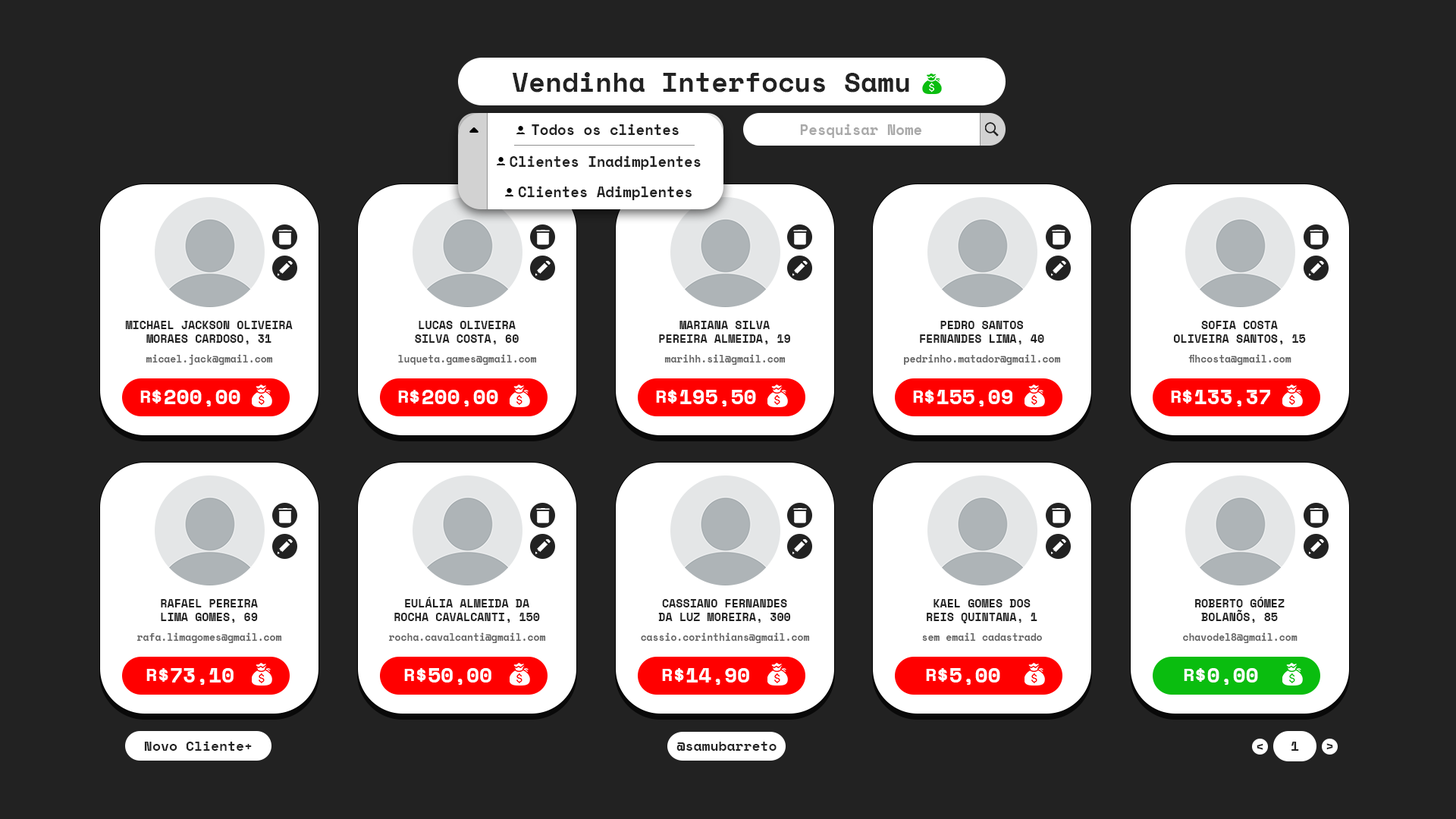
<style>
.page{position:relative;width:1456px;height:819px;background:#222222}
.page>*{position:absolute;margin:0}
.t1{font:27.1px "SpaceMono-Bold";color:#222222}
.t2{font:14.3px "SpaceMono-Bold";color:#222222}
.t3{font:14.3px "SpaceMono-Bold";color:#a9a9a9}
.t4{font:11.4px "SpaceMono-Bold";color:#222222}
.t5{font:9.9px "SpaceMono-Bold";color:#656565}
.t6{font:21.1px "SpaceMono-Bold";color:#ffffff}
.t7{font:18.5px "SpaceMono-Bold";color:#ffffff}
.t8{font:13.6px "SpaceMono-Bold";color:#222222}
</style>
<div class="page">
<p class="t1" style="left:512px;top:72px;width:397px;height:21px">Vendinha Interfocus Samu</p>
<p class="t2" style="left:532px;top:124px;width:147px;height:11px">Todos os clientes</p>
<p class="t2" style="left:532px;top:124px;width:147px;height:11px">Todos os clientes</p>
<p class="t3" style="left:800px;top:124px;width:121px;height:14px">Pesquisar Nome</p>
<p class="t2" style="left:510px;top:155px;width:191px;height:15px">Clientes Inadimplentes</p>
<p class="t2" style="left:518px;top:186px;width:174px;height:14px">Clientes Adimplentes</p>
<p class="t4" style="left:125px;top:321px;width:168px;height:23px;text-align:center">MICHAEL JACKSON OLIVEIRA<br>MORAES CARDOSO, 31</p>
<p class="t4" style="left:415px;top:321px;width:104px;height:23px;text-align:center">LUCAS OLIVEIRA<br>SILVA COSTA, 60</p>
<p class="t4" style="left:659px;top:321px;width:131px;height:23px;text-align:center">MARIANA SILVA<br>PEREIRA ALMEIDA, 19</p>
<p class="t4" style="left:920px;top:321px;width:124px;height:23px;text-align:center">PEDRO SANTOS<br>FERNANDES LIMA, 40</p>
<p class="t4" style="left:1173px;top:321px;width:133px;height:23px;text-align:center">SOFIA COSTA<br>OLIVEIRA SANTOS, 15</p>
<p class="t5" style="left:146px;top:354px;width:127px;height:11px">micael.jack@gmail.com</p>
<p class="t5" style="left:398px;top:354px;width:139px;height:11px">luqueta.games@gmail.com</p>
<p class="t5" style="left:664px;top:354px;width:122px;height:11px">marihh.sil@gmail.com</p>
<p class="t5" style="left:904px;top:354px;width:157px;height:11px">pedrinho.matador@gmail.com</p>
<p class="t5" style="left:1188px;top:354px;width:103px;height:11px">fihcosta@gmail.com</p>
<p class="t6" style="left:152px;top:390px;width:88px;height:16px">$200,00</p>
<p class="t6" style="left:409px;top:390px;width:89px;height:16px">$200,00</p>
<p class="t6" style="left:667px;top:390px;width:89px;height:16px">$195,50</p>
<p class="t6" style="left:924px;top:390px;width:88px;height:16px">$155,09</p>
<p class="t6" style="left:1182px;top:390px;width:88px;height:16px">$133,37</p>
<p class="t7" style="left:140px;top:391px;width:10px;height:12px">R</p>
<p class="t7" style="left:398px;top:391px;width:10px;height:12px">R</p>
<p class="t7" style="left:656px;top:391px;width:10px;height:12px">R</p>
<p class="t7" style="left:913px;top:391px;width:10px;height:12px">R</p>
<p class="t7" style="left:1171px;top:391px;width:10px;height:12px">R</p>
<p class="t4" style="left:161px;top:599px;width:97px;height:24px;text-align:center">RAFAEL PEREIRA<br>LIMA GOMES, 69</p>
<p class="t4" style="left:394px;top:597px;width:146px;height:26px;text-align:center">EULÁLIA ALMEIDA DA<br>ROCHA CAVALCANTI, 150</p>
<p class="t4" style="left:658px;top:599px;width:133px;height:24px;text-align:center">CASSIANO FERNANDES<br>DA LUZ MOREIRA, 300</p>
<p class="t4" style="left:927px;top:599px;width:110px;height:24px;text-align:center">KAEL GOMES DOS<br>REIS QUINTANA, 1</p>
<p class="t4" style="left:1195px;top:597px;width:90px;height:26px;text-align:center">ROBERTO GÓMEZ<br>BOLANÕS, 85</p>
<p class="t5" style="left:136px;top:632px;width:146px;height:11px">rafa.limagomes@gmail.com</p>
<p class="t5" style="left:388px;top:632px;width:158px;height:11px">rocha.cavalcanti@gmail.com</p>
<p class="t5" style="left:641px;top:632px;width:169px;height:11px">cassio.corinthians@gmail.com</p>
<p class="t5" style="left:922px;top:632px;width:120px;height:9px">sem email cadastrado</p>
<p class="t5" style="left:1183px;top:632px;width:114px;height:11px">chavodel8@gmail.com</p>
<p class="t7" style="left:146px;top:669px;width:10px;height:12px">R</p>
<p class="t6" style="left:158px;top:668px;width:76px;height:17px">$73,10</p>
<p class="t7" style="left:404px;top:669px;width:10px;height:12px">R</p>
<p class="t6" style="left:416px;top:668px;width:75px;height:17px">$50,00</p>
<p class="t7" style="left:662px;top:669px;width:10px;height:12px">R</p>
<p class="t6" style="left:674px;top:668px;width:75px;height:17px">$14,90</p>
<p class="t7" style="left:926px;top:669px;width:10px;height:12px">R</p>
<p class="t6" style="left:938px;top:668px;width:62px;height:17px">$5,00</p>
<p class="t7" style="left:1184px;top:669px;width:10px;height:12px">R</p>
<p class="t6" style="left:1196px;top:668px;width:62px;height:17px">$0,00</p>
<p class="t8" style="left:144px;top:741px;width:108px;height:10px">Novo Cliente+</p>
<p class="t8" style="left:676px;top:742px;width:101px;height:9px">@samubarreto</p>
<p class="t8" style="left:1257px;top:743px;width:6px;height:7px">&lt;</p>
<p class="t8" style="left:1291px;top:742px;width:8px;height:9px">1</p>
<p class="t8" style="left:1326px;top:743px;width:7px;height:7px;rotate:180deg">&lt;</p>
</div>
